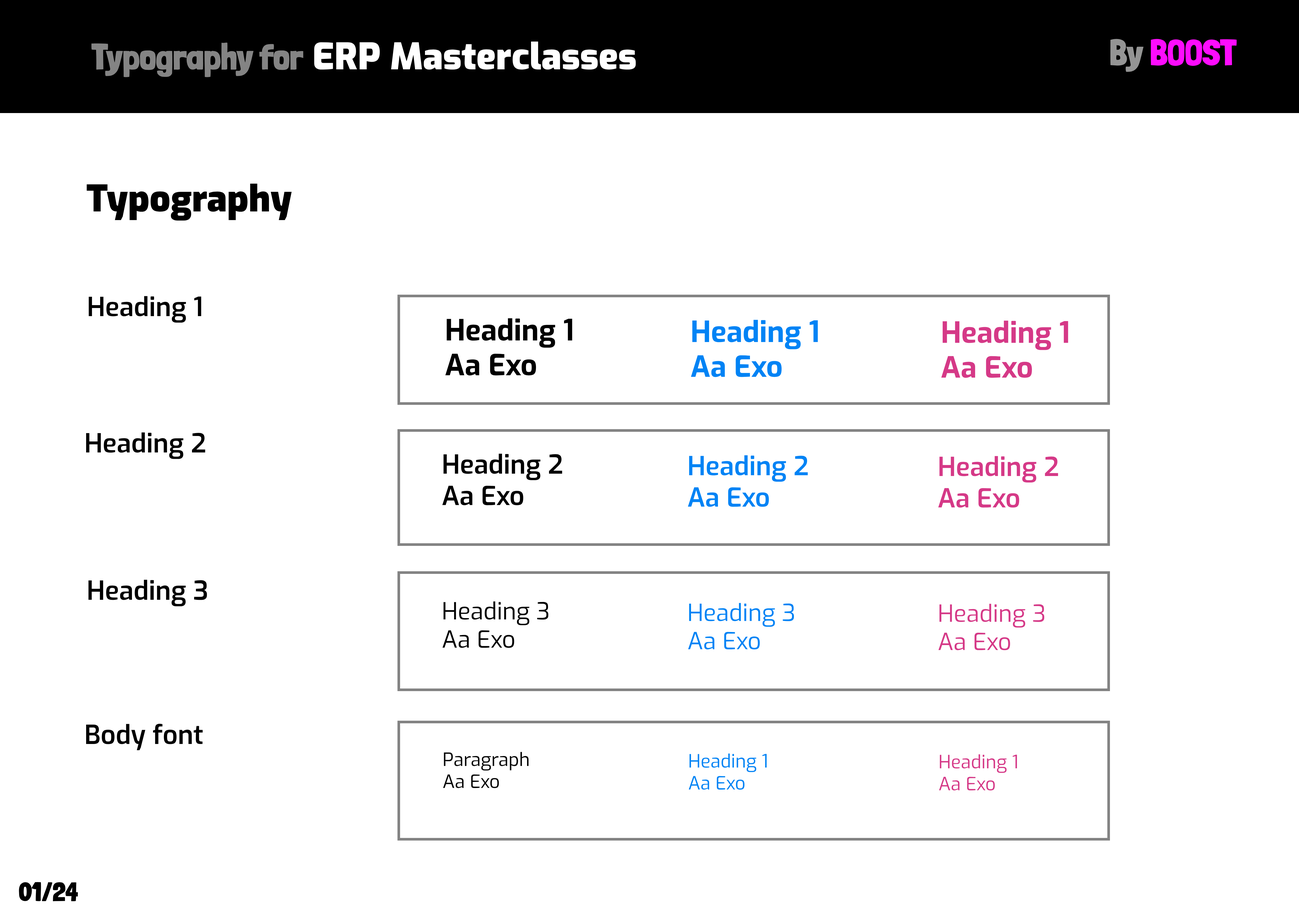
<style>
.page{position:relative;width:1299px;height:918px;background:#ffffff}
.page>*{position:absolute;margin:0}
.t1{font:36.5px "Exo-Black";color:#ffffff}
.t2{font:36.5px "LondrinaSolid-Black";color:#848484}
.t3{font:36.5px "LondrinaSolid-Black";color:#fd0cfd}
.t4{font:36.5px "LondrinaSolid-Black";color:#949494}
.t5{font:36.5px "Exo-Black";color:#000000}
.t6{font:26.3px "Exo-SemiBold";color:#000000}
.t7{font:29.1px "Exo-Bold";color:#000000}
.t8{font:29.1px "Exo-Bold";color:#0083f5}
.t9{font:29.1px "Exo-Bold";color:#d53987}
.t10{font:26.2px "Exo-SemiBold";color:#000000}
.t11{font:26.2px "Exo-SemiBold";color:#0083f5}
.t12{font:26.2px "Exo-SemiBold";color:#d53987}
.t13{font:23.6px "Exo-Regular";color:#000000}
.t14{font:23.6px "Exo-Regular";color:#0083f5}
.t15{font:23.6px "Exo-Regular";color:#d53987}
.t16{font:18.3px "Exo-Regular";color:#000000}
.t17{font:18.3px "Exo-Regular";color:#0083f5}
.t18{font:18.3px "Exo-Regular";color:#d53987}
.t19{font:26.3px "LondrinaSolid-Black";color:#000000}
</style>
<div class="page">
<p class="t1" style="left:91px;top:41px;width:545px;height:36px"><span class="t2">Typography for </span>ERP Masterclasses</p>
<p class="t3" style="left:1110px;top:39px;width:126px;height:33px"><span class="t4">By </span>BOOST</p>
<p class="t5" style="left:87px;top:183px;width:205px;height:38px">Typography</p>
<p class="t6" style="left:88px;top:296px;width:113px;height:27px">Heading 1 font</p>
<p class="t7" style="left:445px;top:318px;width:127px;height:58px">Heading 1<br>Aa Exo</p>
<p class="t8" style="left:691px;top:320px;width:127px;height:57px">Heading 1<br>Aa Exo</p>
<p class="t9" style="left:941px;top:321px;width:127px;height:57px">Heading 1<br>Aa Exo</p>
<p class="t6" style="left:86px;top:432px;width:119px;height:27px">Heading 2 font</p>
<p class="t10" style="left:442px;top:454px;width:120px;height:51px">Heading 2<br>Aa Exo</p>
<p class="t11" style="left:688px;top:455px;width:120px;height:52px">Heading 2<br>Aa Exo</p>
<p class="t12" style="left:938px;top:456px;width:120px;height:52px">Heading 2<br>Aa Exo</p>
<p class="t6" style="left:88px;top:580px;width:119px;height:26px">Heading 3</p>
<p class="t13" style="left:442px;top:602px;width:106px;height:46px">Heading 3<br>Aa Exo</p>
<p class="t14" style="left:688px;top:603px;width:106px;height:47px">Heading 3<br>Aa Exo</p>
<p class="t15" style="left:938px;top:604px;width:106px;height:46px">Heading 3<br>Aa Exo</p>
<p class="t6" style="left:86px;top:724px;width:117px;height:26px">Body font</p>
<p class="t16" style="left:443px;top:752px;width:85px;height:36px">Paragraph<br>Aa Exo</p>
<p class="t17" style="left:688px;top:754px;width:78px;height:36px">Heading 1<br>Aa Exo</p>
<p class="t18" style="left:939px;top:754px;width:78px;height:37px">Heading 1<br>Aa Exo</p>
<p class="t19" style="left:19px;top:882px;width:59px;height:19px">01/24</p>
</div>
